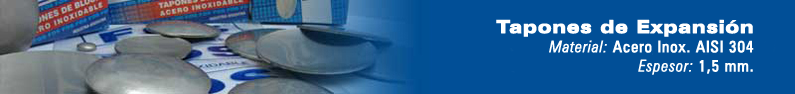
<style>
.page{position:relative;width:795px;height:94px;background:#014f97}
.page>*{position:absolute;margin:0}
.t1{font:18px "ZurichBT-BlackExtended";letter-spacing:0.025em;color:#ffffff;font-weight:bold}
.t2{font:16px "ZurichBT-LightCondensedItalic";letter-spacing:0.025em;color:#ffffff;font-weight:bold}
.t3{font:16px "ZurichBT-RomanCondensed";letter-spacing:0.025em;color:#ffffff;font-weight:bold}
</style>
<div class="page">
<p class="t1" style="left:496px;top:19px;width:258px;height:56px;text-align:right">Tapones de Expansión<br><span class="t2">Material: </span><span class="t3">Acero Inox. AISI 304<br></span><span class="t2">Espesor: </span><span class="t3">1,5 mm.</span></p>
</div>
